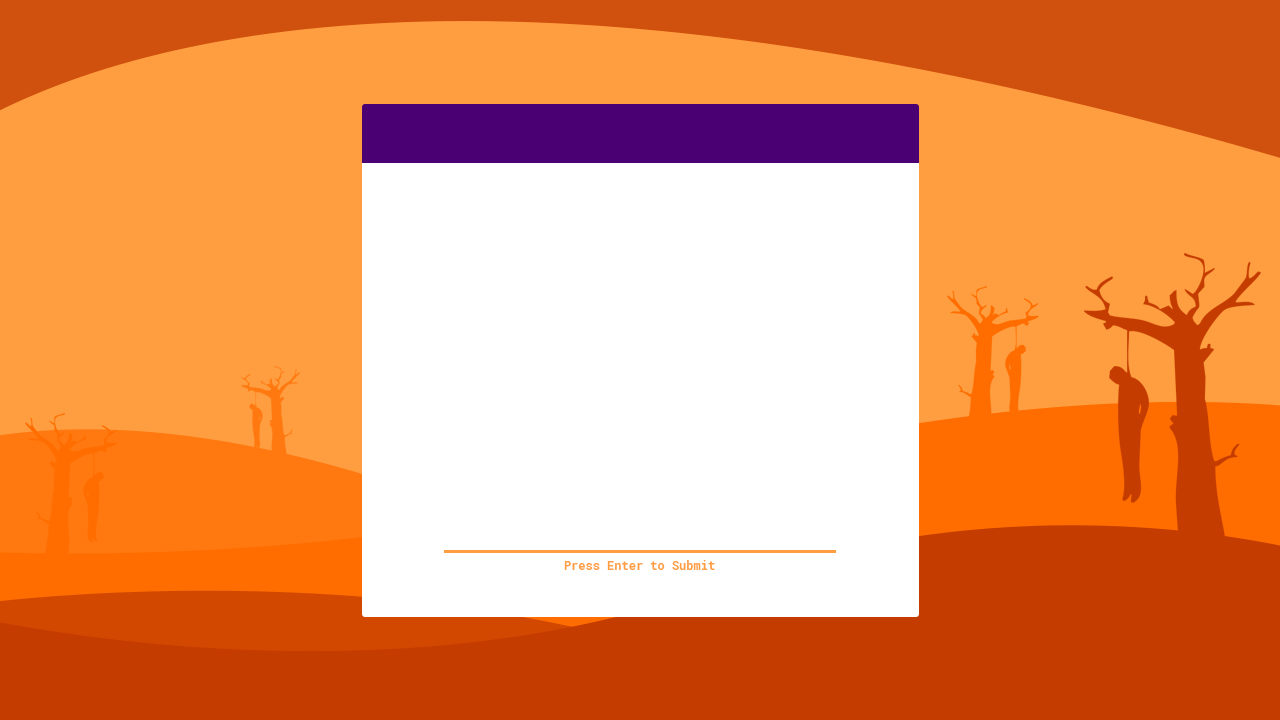
<style>
.page{position:relative;width:1280px;height:720px;background:#ff9e40}
.page>*{position:absolute;margin:0}
.t1{font:12px "RobotoMono-Bold";color:#ff9e40}
</style>
<div class="page">
<p class="t1" style="left:564px;top:560px;width:151px;height:10px">Press Enter to Submit</p>
</div>
